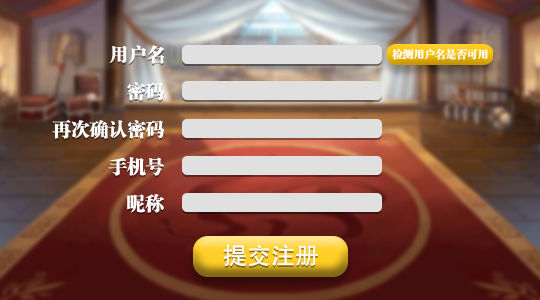
<style>
.page{position:relative;width:540px;height:300px}
.page>*{position:absolute;margin:0}
.t1{font:18.7px "FZCSJW--GB1-0";color:#ffffff}
.t2{font:10.7px "FZCSJW--GB1-0";color:#fffefe}
.t3{font:24px "FZHTJW--GB1-0";color:#ffffff}
</style>
<div class="page">
<p class="t1" style="left:109px;top:45px;width:56px;height:19px">用户名</p>
<p class="t2" style="left:392px;top:48px;width:96px;height:12px">检测用户名是否可用</p>
<p class="t1" style="left:127px;top:82px;width:37px;height:19px">密码</p>
<p class="t1" style="left:52px;top:120px;width:113px;height:19px">再次确认密码</p>
<p class="t1" style="left:108px;top:157px;width:56px;height:19px">手机号</p>
<p class="t1" style="left:127px;top:194px;width:37px;height:19px">昵称</p>
<p class="t3" style="left:223px;top:244px;width:95px;height:23px">提交注册</p>
</div>
